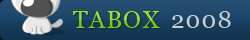
<style>
.page{position:relative;width:250px;height:40px}
.page>*{position:absolute;margin:0}
.t1{font:24px "Georgia";letter-spacing:0.05em}
.t2{font:24px "Georgia";letter-spacing:0.05em;color:#cccccc}
</style>
<div class="page">
<p class="t1" style="left:73px;top:11px;width:87px;height:17px">TABOX</p>
<p class="t2" style="left:172px;top:11px;width:59px;height:17px">2008</p>
</div>
